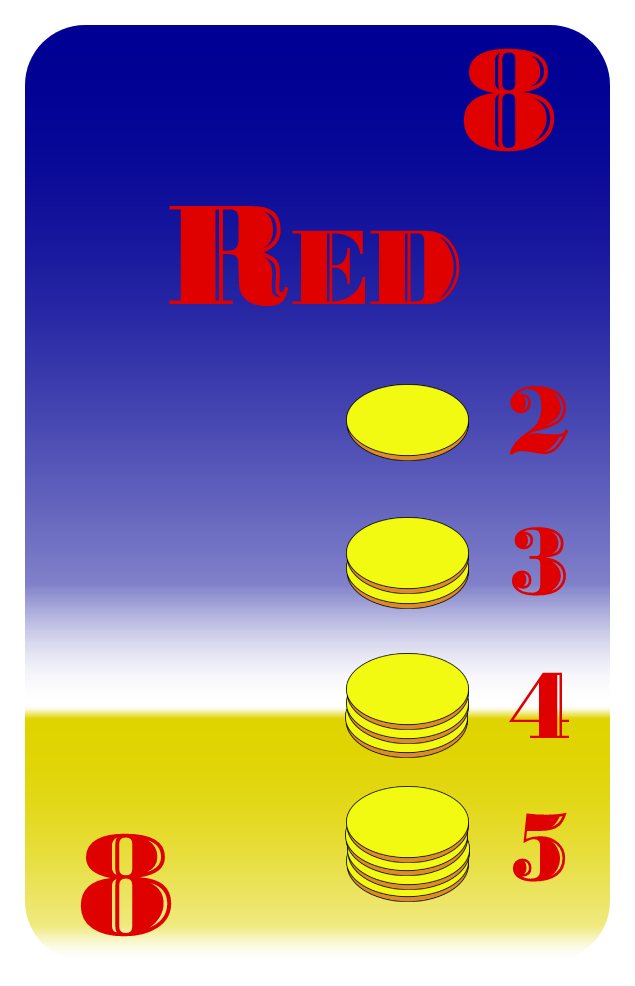
<style>
.page{position:relative;width:635px;height:986px}
.page>*{position:absolute;margin:0}
.t1{font:150px "BodoniHighlightICG";color:#df0000}
.t2{font:112px "BodoniHighlightICG";color:#df0000}
.t3{font:100px "BodoniHighlightICG";color:#df0000}
</style>
<div class="page">
<p class="t1" style="left:463px;top:48px;width:92px;height:104px">8</p>
<p class="t2" style="left:169px;top:206px;width:291px;height:101px"><span class="t1">R</span>ED</p>
<p class="t3" style="left:509px;top:386px;width:60px;height:69px">2</p>
<p class="t3" style="left:511px;top:527px;width:55px;height:69px">3</p>
<p class="t3" style="left:508px;top:672px;width:61px;height:66px">4</p>
<p class="t3" style="left:512px;top:812px;width:55px;height:70px">5</p>
<p class="t1" style="left:80px;top:833px;width:92px;height:104px">8</p>
</div>
